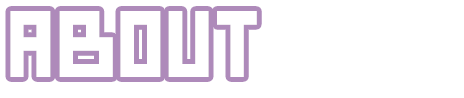
<style>
.page{position:relative;width:464px;height:98px;background:#ffffff}
.page>*{position:absolute;margin:0}
.t1{font:91.4px "DSPixelCyr";letter-spacing:0.025em;color:#ffffff}
</style>
<div class="page">
<p class="t1" style="left:10px;top:11px;width:247px;height:66px">about</p>
</div>
